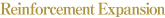
<style>
.page{position:relative;width:165px;height:18px;background:#ffffff}
.page>*{position:absolute;margin:0}
.t1{font:16px "RyuminPro-ExBold";letter-spacing:-0.08em;color:#af943f}
</style>
<div class="page">
<p class="t1" style="left:0px;top:2px;width:165px;height:15px">Reinforcement Expansion</p>
</div>
